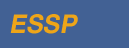
<style>
.page{position:relative;width:129px;height:48px;background:#426194}
.page>*{position:absolute;margin:0}
.t1{font:26px "HelveticaNeue-Bold";color:#eea518;text-transform:uppercase;font-style:italic}
</style>
<div class="page">
<p class="t1" style="left:10px;top:14px;width:68px;height:20px">essp</p>
</div>
